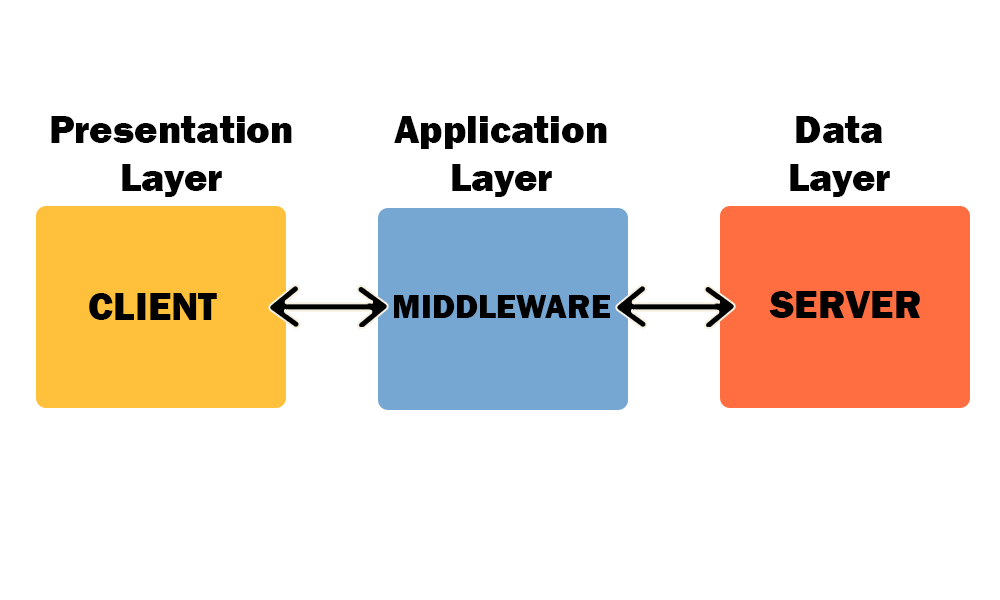
<style>
.page{position:relative;width:1000px;height:600px;background:#ffffff}
.page>*{position:absolute;margin:0}
.t1{font:40px "FranklinGothic-Heavy";color:#000000}
.t2{font:34px "FranklinGothic-Heavy";color:#000000}
</style>
<div class="page">
<p class="t1" style="left:51px;top:116px;width:241px;height:81px;text-align:center">Presentation<br>Layer</p>
<p class="t1" style="left:394px;top:116px;width:213px;height:81px;text-align:center">Application<br>Layer</p>
<p class="t1" style="left:790px;top:116px;width:100px;height:81px;text-align:center">Data<br>Layer</p>
<p class="t1" style="left:89px;top:293px;width:128px;height:27px">CLIENT</p>
<p class="t1" style="left:769px;top:291px;width:151px;height:27px">SERVER</p>
<p class="t2" style="left:394px;top:295px;width:216px;height:23px">MIDDLEWARE</p>
</div>
